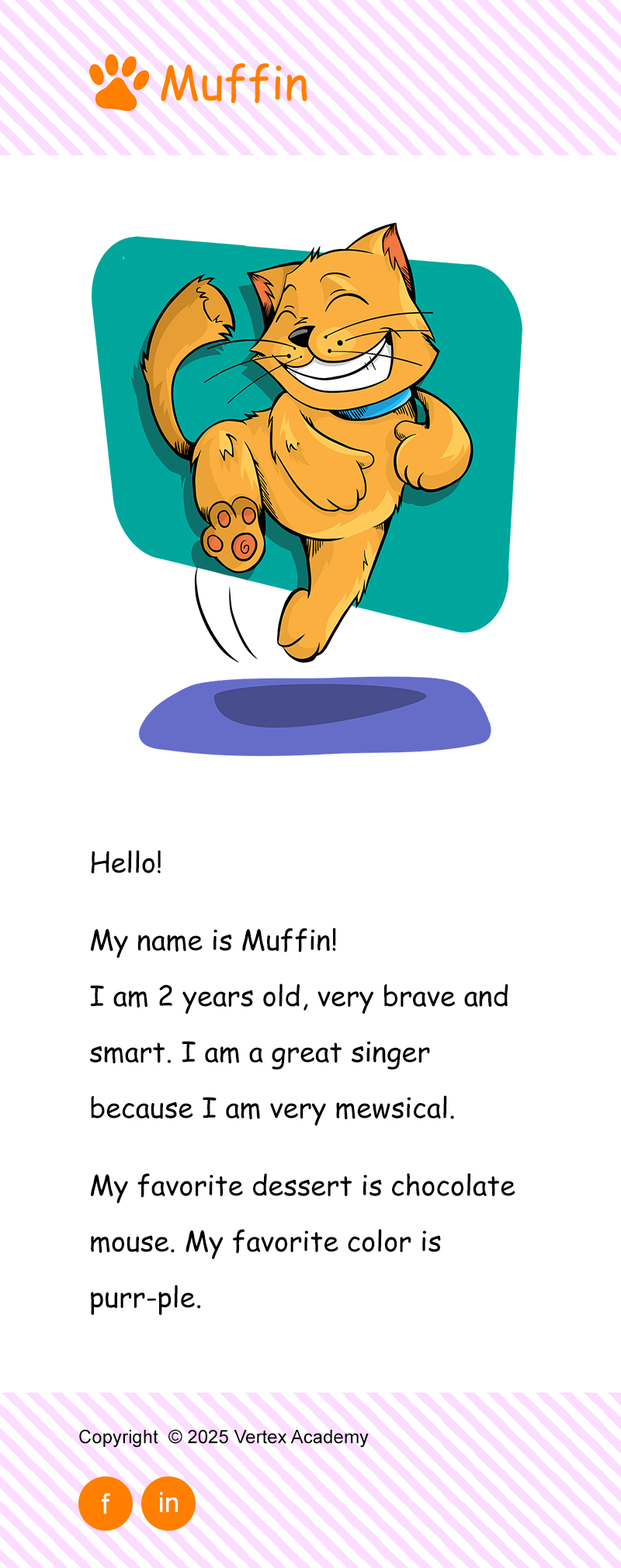
<style>
.page{position:relative;width:621px;height:1568px;background:#ffffff}
.page>*{position:absolute;margin:0}
.t1{font:27.9px/55.9px "ComicSansMS";color:#000000}
.t2{font:27.9px/77.6px "ComicSansMS";color:#000000}
.t3{font:18.6px "ArialMT";color:#000000}
.t4{font:27.9px "ArialMT";color:#ffffff}
</style>
<div class="page">
<p class="t1" style="left:90px;top:850px;width:425px;height:465px">Hell<span class="t2">o!<br>My </span>name is Muffin!<br>I am 2 years old, very brave and <br>smart. I am a great singer <br>because I am very mewsical.<span class="t2"><br>My favorite des</span>sert is chocolate <br>mouse. My favorite color is <br>purr-ple.</p>
<p class="t3" style="left:79px;top:1429px;width:290px;height:19px">Copyright  © 2025 Vertex Academy</p>
<p class="t4" style="left:102px;top:1493px;width:8px;height:21px">f</p>
<p class="t4" style="left:160px;top:1492px;width:18px;height:20px">in</p>
</div>
